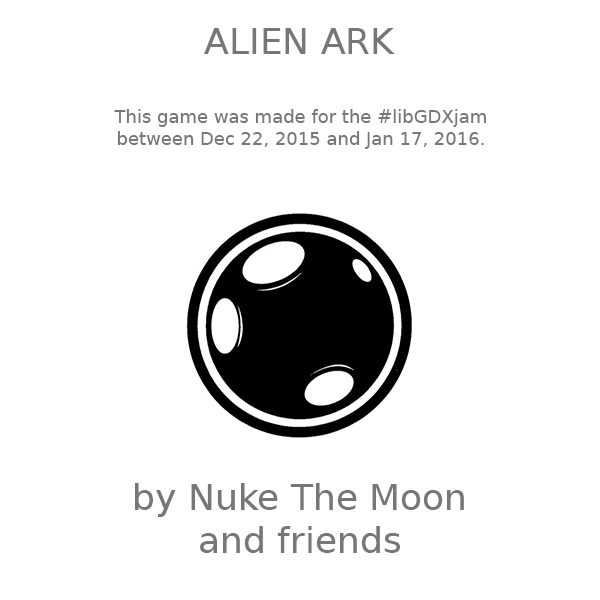
<style>
.page{position:relative;width:600px;height:600px;background:#ffffff}
.page>*{position:absolute;margin:0}
.t1{font:36px "DejaVuSans";color:#777777}
.t2{font:18px "DejaVuSans";color:#777777}
</style>
<div class="page">
<p class="t1" style="left:204px;top:28px;width:191px;height:26px">ALIEN ARK</p>
<p class="t2" style="left:114px;top:109px;width:372px;height:40px;text-align:center">This game was made for the #libGDXjam<br>between Dec 22, 2015 and Jan 17, 2016.</p>
<p class="t1" style="left:135px;top:483px;width:329px;height:70px;text-align:center">by Nuke The Moon<br>and friends</p>
</div>
